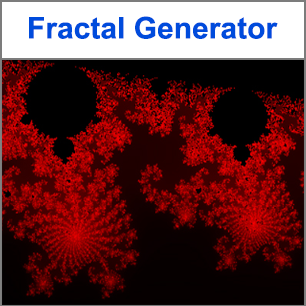
<style>
.page{position:relative;width:306px;height:306px}
.page>*{position:absolute;margin:0}
.t1{font:30px "Arial-BoldMT";color:#004bdc}
</style>
<div class="page">
<p class="t1" style="left:29px;top:16px;width:249px;height:23px">Fractal Generator</p>
</div>
